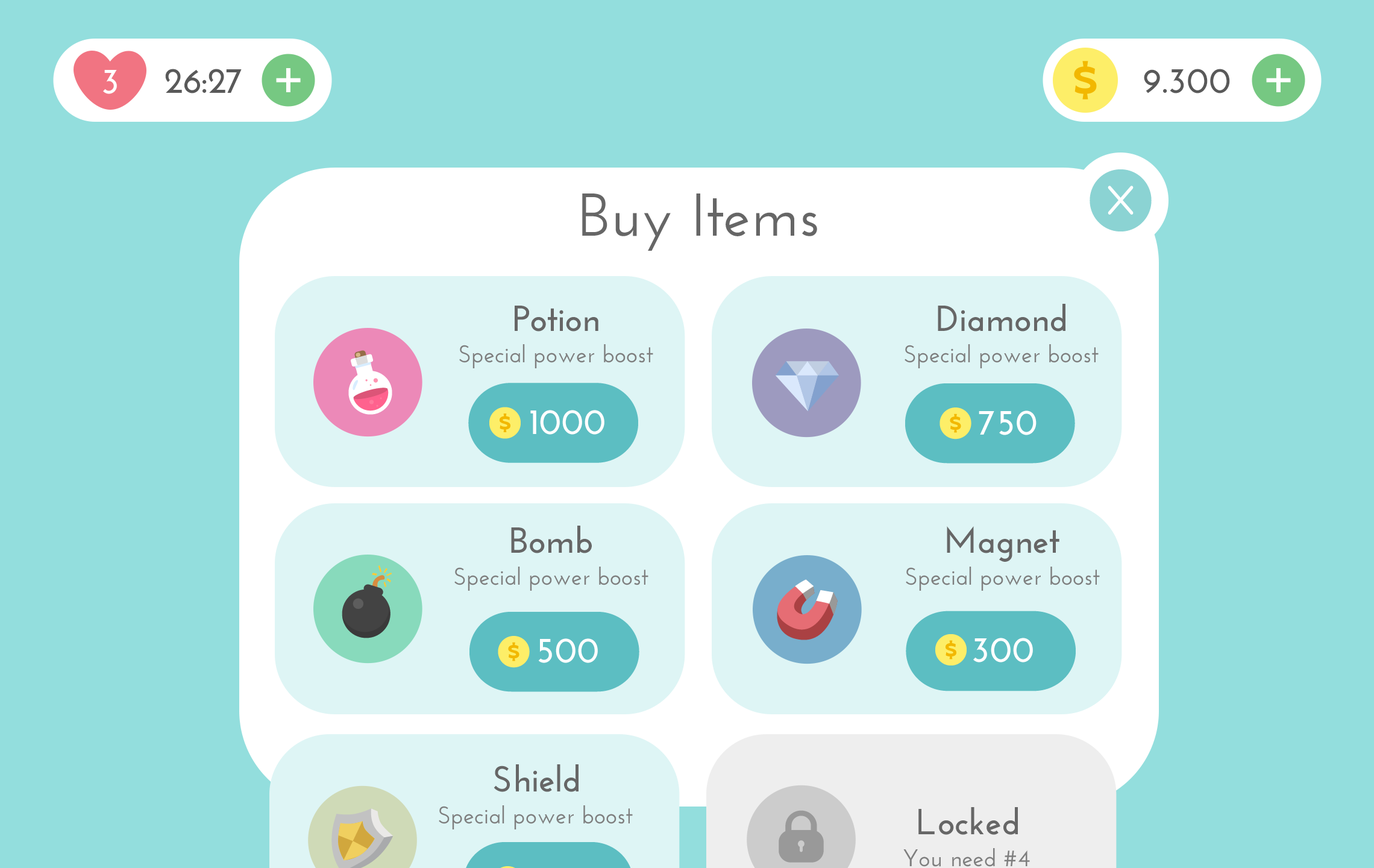
<style>
.page{position:relative;width:1374px;height:868px;background:#93dedd}
.page>*{position:absolute;margin:0}
.t1{font:36.2px "JosefinSans-Bold";color:#ffffff}
.t2{font:36.2px "JosefinSans-Bold";color:#595959}
.t3{font:60.3px "JosefinSans-SemiBold";color:#666666}
.t4{font:36.2px "JosefinSans-Bold";color:#666666}
.t5{font:24.1px "JosefinSans-SemiBold";color:#7e7e7e}
</style>
<div class="page">
<p class="t1" style="left:103px;top:70px;width:14px;height:24px">3</p>
<p class="t2" style="left:165px;top:69px;width:77px;height:24px">26:27</p>
<p class="t2" style="left:1144px;top:69px;width:86px;height:24px">9.300</p>
<p class="t3" style="left:582px;top:193px;width:235px;height:58px">Buy Items</p>
<p class="t4" style="left:515px;top:306px;width:83px;height:25px">Potion</p>
<p class="t4" style="left:938px;top:304px;width:127px;height:27px">Diamond</p>
<p class="t5" style="left:459px;top:344px;width:194px;height:24px">Special power boost</p>
<p class="t5" style="left:905px;top:344px;width:194px;height:24px">Special power boost</p>
<p class="t1" style="left:530px;top:410px;width:74px;height:25px">1000</p>
<p class="t1" style="left:979px;top:410px;width:58px;height:25px">750</p>
<p class="t4" style="left:511px;top:526px;width:81px;height:27px">Bomb</p>
<p class="t4" style="left:947px;top:526px;width:112px;height:36px">Magnet</p>
<p class="t5" style="left:454px;top:566px;width:194px;height:25px">Special power boost</p>
<p class="t5" style="left:906px;top:566px;width:194px;height:25px">Special power boost</p>
<p class="t1" style="left:538px;top:638px;width:60px;height:25px">500</p>
<p class="t1" style="left:973px;top:638px;width:60px;height:24px">300</p>
<p class="t4" style="left:494px;top:764px;width:85px;height:28px">Shield</p>
<p class="t5" style="left:439px;top:805px;width:194px;height:24px">Special power boost</p>
</div>
